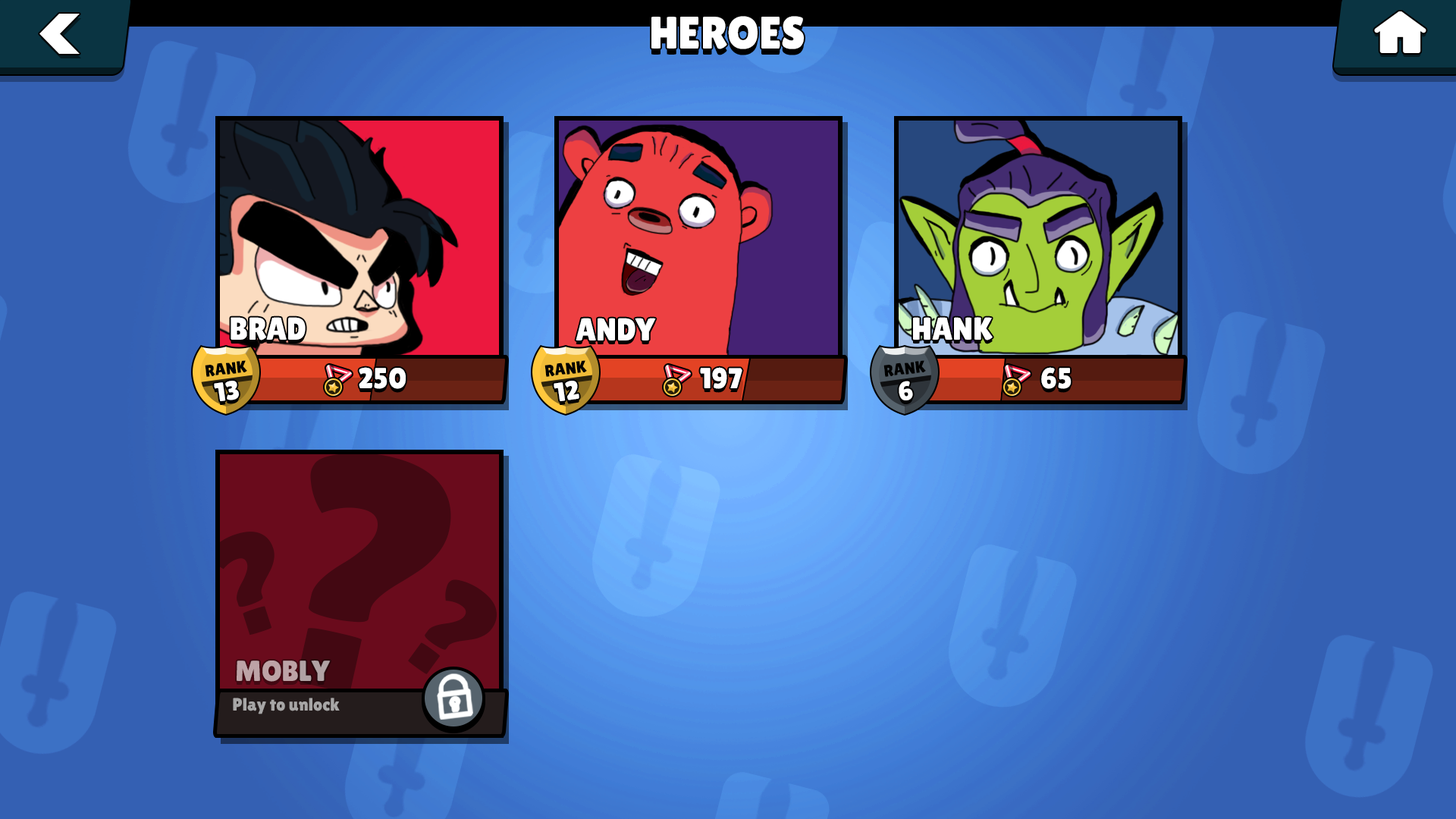
<style>
.page{position:relative;width:1456px;height:819px}
.page>*{position:absolute;margin:0}
.t1{font:45.5px "LilitaOne";color:#ffffff}
.t2{font:31.7px "LilitaOne";letter-spacing:-0.005em;color:#ffffff}
.t3{font:16.7px "LilitaOne";color:#000000}
.t4{font:29px "LilitaOne";color:#ffffff}
.t5{font:26.5px "LilitaOne";color:#ffffff}
.t6{font:332.5px "LilitaOne";letter-spacing:-0.005em;color:#430812}
.t7{font:139.4px "LilitaOne";letter-spacing:-0.005em;color:#430812}
.t8{font:29px "LilitaOne";color:#bda3a6}
.t9{font:17.9px "LilitaOne";color:#a7a6a6}
</style>
<div class="page">
<p class="t1" style="left:651px;top:16px;width:153px;height:33px">HEROES</p>
<p class="t2" style="left:231px;top:317px;width:75px;height:23px">BRAD</p>
<p class="t2" style="left:576px;top:318px;width:80px;height:22px">ANDY</p>
<p class="t2" style="left:913px;top:317px;width:80px;height:23px">HANK</p>
<p class="t3" style="left:205px;top:360px;width:42px;height:17px;rotate:-6deg">RANK</p>
<p class="t3" style="left:544px;top:360px;width:43px;height:17px;rotate:-6deg">RANK</p>
<p class="t3" style="left:883px;top:360px;width:43px;height:17px;rotate:-6deg">RANK</p>
<p class="t4" style="left:359px;top:367px;width:47px;height:22px">250</p>
<p class="t4" style="left:700px;top:367px;width:42px;height:22px">197</p>
<p class="t4" style="left:1041px;top:367px;width:31px;height:22px">65</p>
<p class="t5" style="left:214px;top:381px;width:25px;height:20px;rotate:-8deg">13</p>
<p class="t5" style="left:554px;top:381px;width:25px;height:20px;rotate:-8deg">12</p>
<p class="t5" style="left:899px;top:381px;width:14px;height:19px;rotate:-8deg">6</p>
<p class="t6" style="left:297px;top:453px;width:154px;height:239px;rotate:13deg">?</p>
<p class="t7" style="left:210px;top:532px;width:65px;height:103px;rotate:-18deg">?</p>
<p class="t7" style="left:408px;top:579px;width:89px;height:95px;rotate:36deg">?</p>
<p class="t8" style="left:237px;top:660px;width:94px;height:22px">MOBLY</p>
<p class="t9" style="left:233px;top:698px;width:107px;height:16px">Play to unlock</p>
</div>
